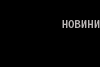
<style>
.page{position:relative;width:100px;height:67px;background:#000000}
.page>*{position:absolute;margin:0}
.t1{font:16px "MyriadPro-Cond";color:#b9b5b5}
</style>
<div class="page">
<p class="t1" style="left:62px;top:20px;width:38px;height:8px">новини</p>
</div>
